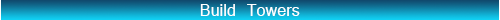
<style>
.page{position:relative;width:500px;height:20px}
.page>*{position:absolute;margin:0}
.t1{font:18px "Vrinda";color:#ffffff}
</style>
<div class="page">
<p class="t1" style="left:200px;top:4px;width:100px;height:12px">Build Towers</p>
</div>
